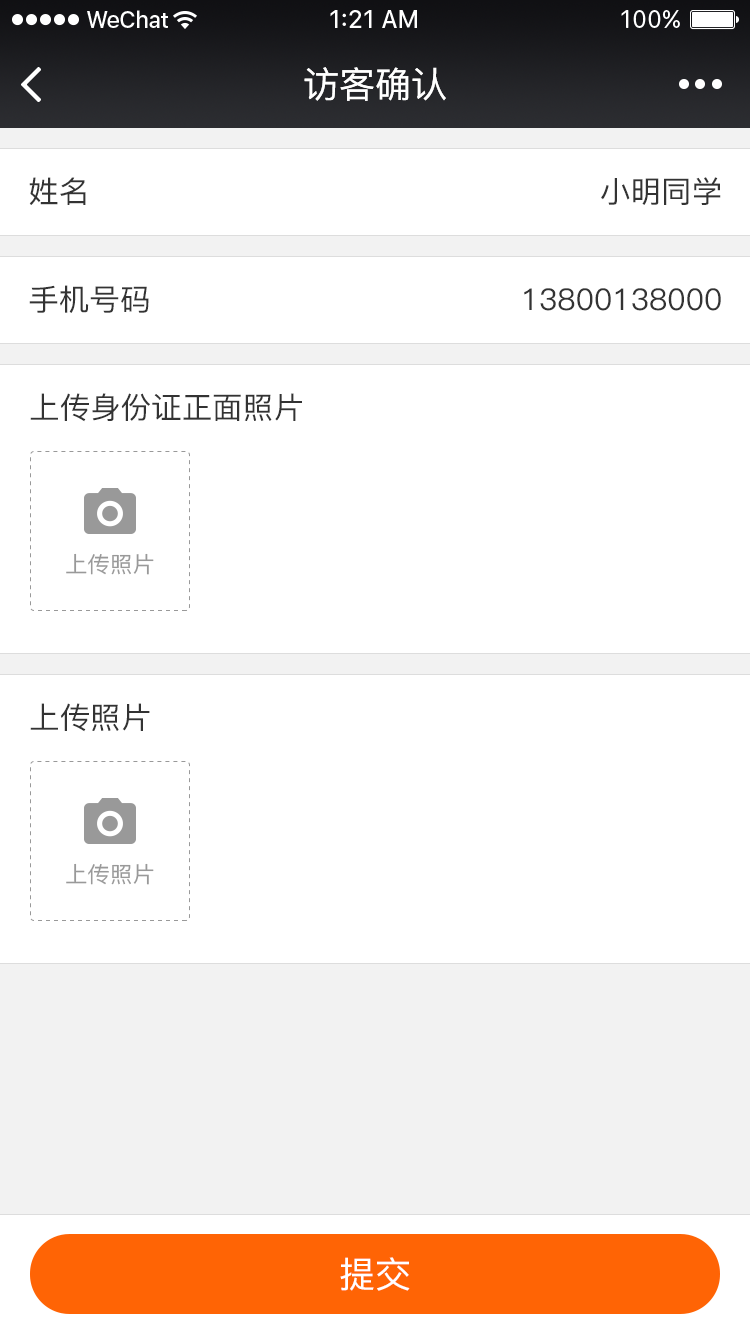
<style>
.page{position:relative;width:750px;height:1334px;background:#ffffff}
.page>*{position:absolute;margin:0}
.t1{font:36px "PingFang-SC-Medium";color:#ffffff}
.t2{font:30px "PingFang-SC-Medium";color:#333333}
.t3{font:29.9px "PingFang-SC-Medium";color:#333333}
.t4{font:22px "PingFang-SC-Medium";color:#999999}
</style>
<div class="page">
<p class="t1" style="left:304px;top:67px;width:142px;height:34px">访客确认</p>
<p class="t2" style="left:29px;top:177px;width:57px;height:28px">姓名</p>
<p class="t2" style="left:601px;top:177px;width:120px;height:28px">小明同学</p>
<p class="t2" style="left:29px;top:285px;width:120px;height:28px">手机号码</p>
<p class="t2" style="left:524px;top:288px;width:197px;height:23px">13800138000</p>
<p class="t3" style="left:30px;top:393px;width:272px;height:29px">上传身份证正面照片</p>
<p class="t4" style="left:66px;top:553px;width:88px;height:22px">上传照片</p>
<p class="t3" style="left:30px;top:703px;width:120px;height:29px">上传照片</p>
<p class="t4" style="left:66px;top:863px;width:88px;height:22px">上传照片</p>
<p class="t1" style="left:340px;top:1257px;width:70px;height:34px">提交</p>
</div>
